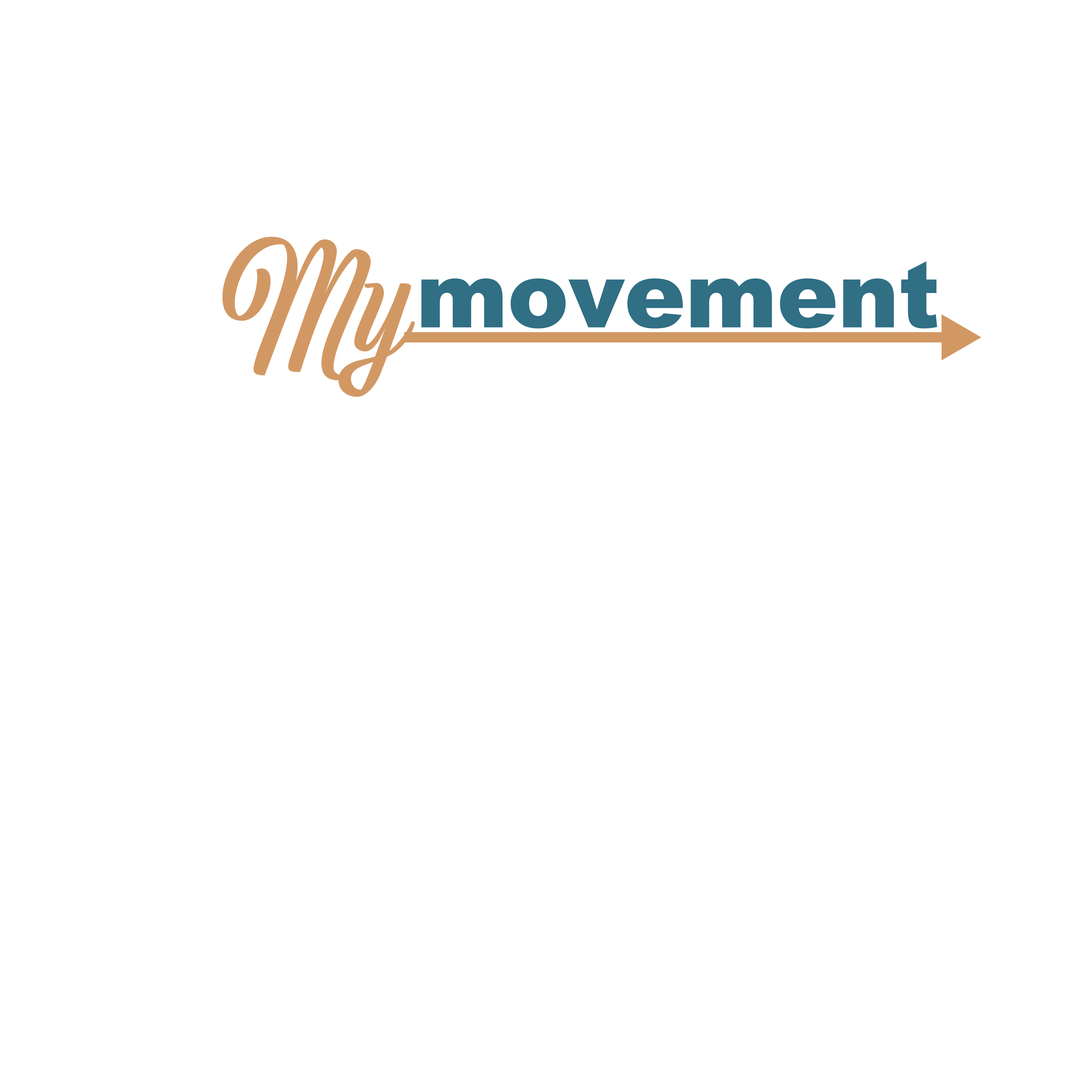
<style>
.page{position:relative;width:1092px;height:1092px;background:#ffffff}
.page>*{position:absolute;margin:0}
.t1{font:136.6px "ViktorScript-Regular";letter-spacing:-0.005em;color:#d29864}
.t2{font:92.1px "Arial-Black";letter-spacing:-0.005em;color:#306f84}
</style>
<div class="page">
<p class="t1" style="left:222px;top:237px;width:193px;height:160px">My</p>
<p class="t2" style="left:421px;top:261px;width:516px;height:68px">movement</p>
</div>
